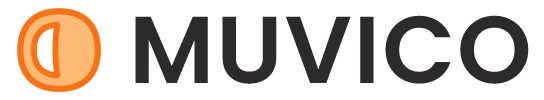
<style>
.page{position:relative;width:544px;height:100px;background:#ffffff}
.page>*{position:absolute;margin:0}
.t1{font:95px "Poppins-SemiBold";letter-spacing:0.02em;color:#2c2a2a}
</style>
<div class="page">
<p class="t1" style="left:135px;top:15px;width:394px;height:69px">MUVICO</p>
</div>
